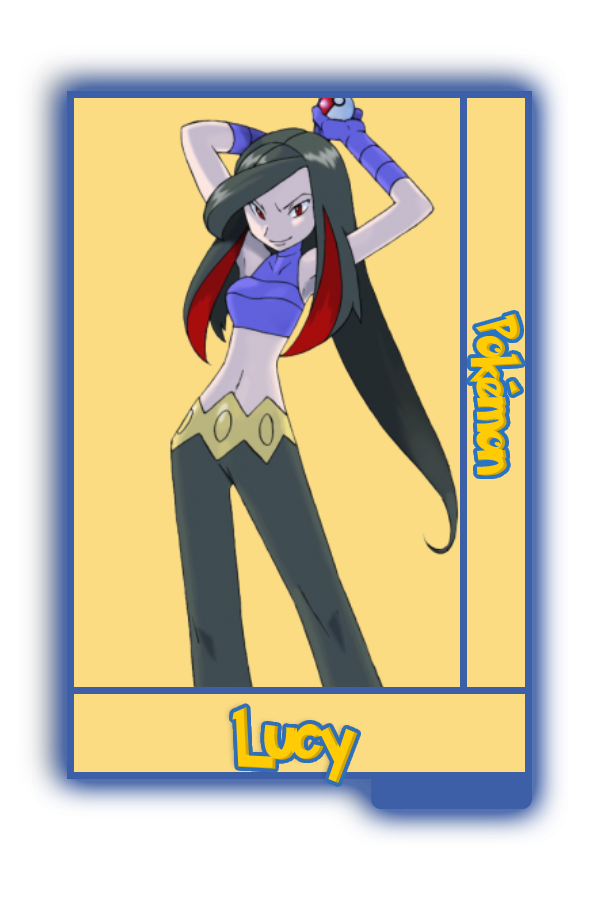
<style>
.page{position:relative;width:600px;height:900px;background:#fbdc83}
.page>*{position:absolute;margin:0}
.t1{font:48.8px "PokemonSolidNormal";color:#ffcb05;scale:0.8 1}
.t2{font:56.6px "PokemonSolidNormal";color:#ffcb05;scale:0.92 1}
</style>
<div class="page">
<p class="t1" style="left:469px;top:313px;width:54px;height:163px;rotate:90deg">Pokémon</p>
<p class="t2" style="left:232px;top:706px;width:126px;height:77px">Lucy</p>
</div>
